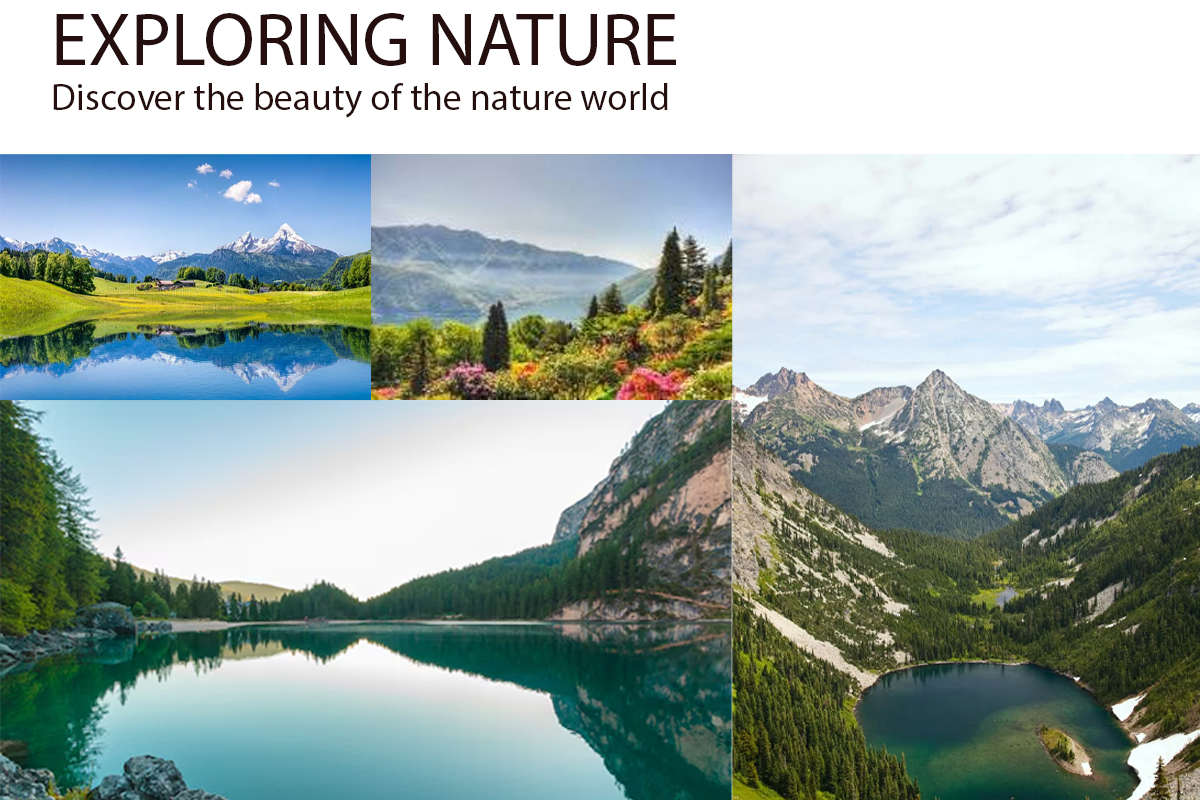
<style>
.page{position:relative;width:1200px;height:800px}
.page>*{position:absolute;margin:0}
.t1{font:37.5px "MyriadPro-Regular";color:#240e0e}
.t2{font:75px "MyriadPro-Regular";color:#240e0e}
</style>
<div class="page">
<p class="t1" style="left:53px;top:13px;width:623px;height:105px"><span class="t2">EXPLORING NATURE<br></span>Discover the beauty of the nature world</p>
</div>
